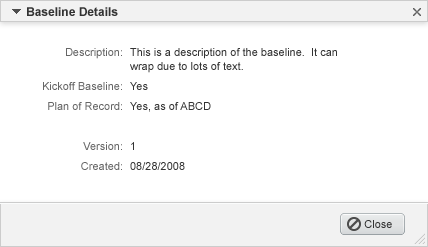
<style>
.page{position:relative;width:428px;height:247px;background:#ffffff}
.page>*{position:absolute;margin:0}
.t1{font:12px "Arial-BoldMT";color:#333333}
.t2{font:11px "ArialMT";color:#666666}
.t3{font:11px/14px "ArialMT";color:#333333}
.t4{font:11px "ArialMT";color:#333333}
</style>
<div class="page">
<p class="t1" style="left:27px;top:7px;width:91px;height:9px">Baseline Details</p>
<p class="t2" style="left:66px;top:48px;width:56px;height:11px">Description:</p>
<p class="t3" style="left:130px;top:48px;width:207px;height:25px">This is a description of the baseline.  It can<br>wrap due to lots of text.</p>
<p class="t2" style="left:43px;top:82px;width:79px;height:8px">Kickoff Baseline:</p>
<p class="t4" style="left:130px;top:82px;width:18px;height:8px">Yes</p>
<p class="t2" style="left:48px;top:102px;width:74px;height:8px">Plan of Record:</p>
<p class="t4" style="left:130px;top:102px;width:81px;height:10px">Yes, as of ABCD</p>
<p class="t2" style="left:83px;top:142px;width:39px;height:8px">Version:</p>
<p class="t4" style="left:131px;top:142px;width:3px;height:8px">1</p>
<p class="t2" style="left:81px;top:162px;width:41px;height:8px">Created:</p>
<p class="t4" style="left:130px;top:162px;width:55px;height:8px">08/28/2008</p>
<p class="t4" style="left:364px;top:220px;width:28px;height:8px">Close</p>
</div>
